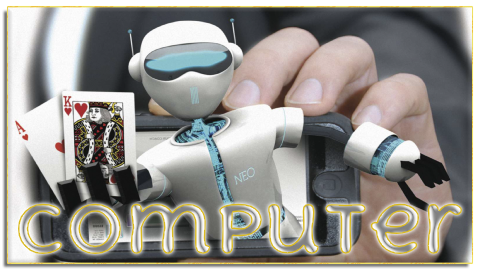
<style>
.page{position:relative;width:480px;height:270px}
.page>*{position:absolute;margin:0}
.t1{font:64.5px "DeliusUnicase-Bold";scale:1.14 1}
</style>
<div class="page">
<p class="t1" style="left:18px;top:203px;width:444px;height:51px">Computer</p>
</div>
